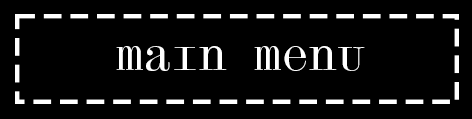
<style>
.page{position:relative;width:472px;height:119px;background:#000000}
.page>*{position:absolute;margin:0}
.t1{font:51.2px "Panoptica-Scotch";color:#ffffff}
</style>
<div class="page">
<p class="t1" style="left:116px;top:46px;width:249px;height:25px">main menu</p>
</div>
